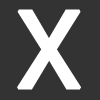
<style>
.page{position:relative;width:100px;height:100px;background:#333333}
.page>*{position:absolute;margin:0}
.t1{font:107px "Roboto-Regular";letter-spacing:-0.08em;color:#ffffff;font-weight:bold}
</style>
<div class="page">
<p class="t1" style="left:17px;top:9px;width:64px;height:81px">X</p>
</div>
